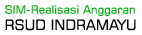
<style>
.page{position:relative;width:142px;height:35px;background:#ffffff}
.page>*{position:absolute;margin:0}
.t1{font:11.5px "Square721BT-Roman";color:#0ab112}
.t2{font:14.3px "Square721BT-Roman";color:#010100}
</style>
<div class="page">
<p class="t1" style="left:5px;top:5px;width:130px;height:11px">SIM-Realisasi Anggaran</p>
<p class="t2" style="left:5px;top:19px;width:131px;height:12px">RSUD INDRAMAYU</p>
</div>
